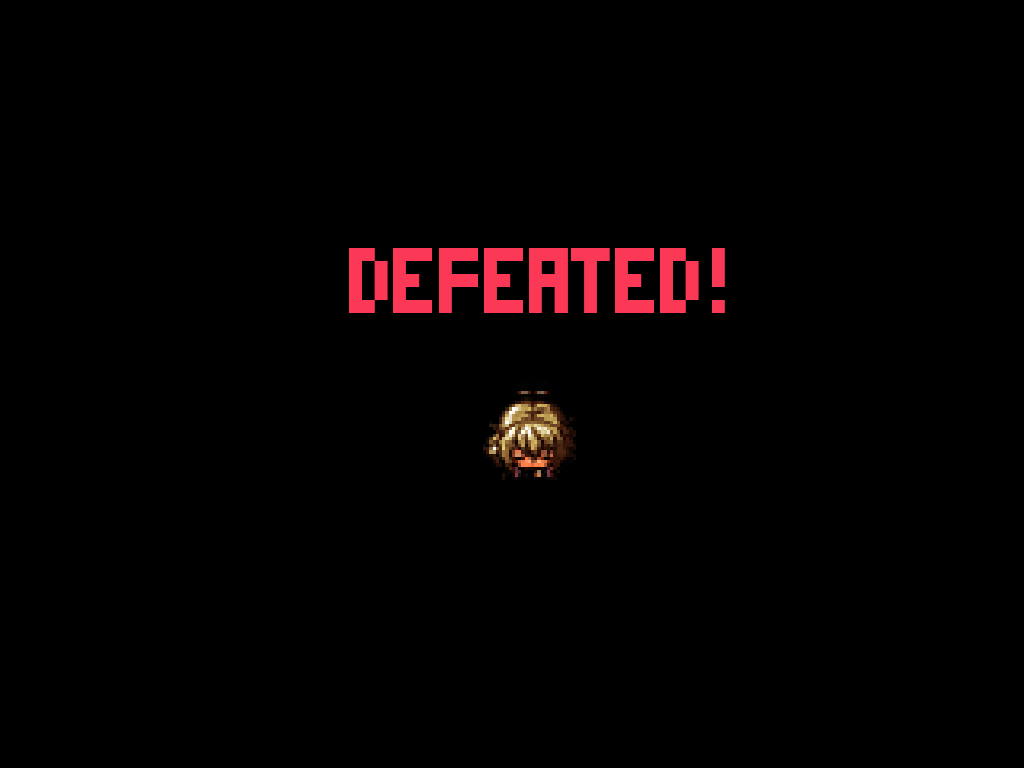
<style>
.page{position:relative;width:1024px;height:768px;background:#000000}
.page>*{position:absolute;margin:0}
.t1{font:90px "DSPixelCyr";color:#fb3856}
</style>
<div class="page">
<p class="t1" style="left:349px;top:248px;width:376px;height:65px">Defeated!</p>
</div>
